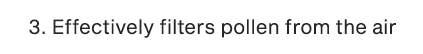
<style>
.page{position:relative;width:423px;height:54px;background:#ffffff}
.page>*{position:absolute;margin:0}
.t1{font:19.9px "SequelSans-BookBody";color:#262626}
</style>
<div class="page">
<p class="t1" style="left:29px;top:19px;width:367px;height:19px">3. Effectively filters pollen from the air</p>
</div>
